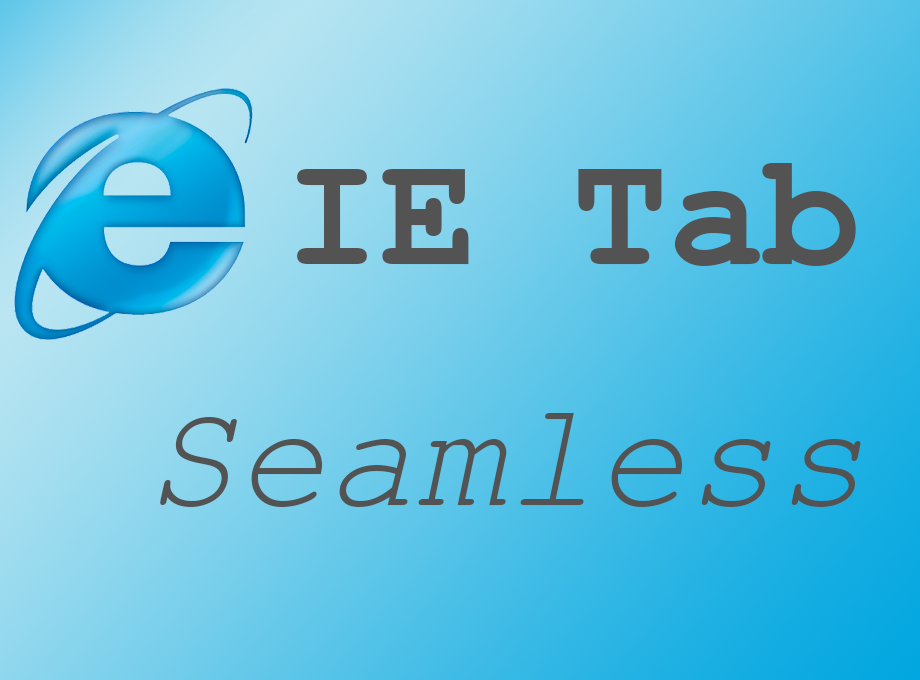
<style>
.page{position:relative;width:920px;height:680px}
.page>*{position:absolute;margin:0}
.t1{font:160px "CourierNewPS-BoldMT";color:#535353}
.t2{font:150px "CourierNewPS-ItalicMT";color:#535353}
</style>
<div class="page">
<p class="t1" style="left:297px;top:163px;width:559px;height:103px">IE Tab</p>
<p class="t2" style="left:160px;top:413px;width:701px;height:94px">Seamless</p>
</div>
